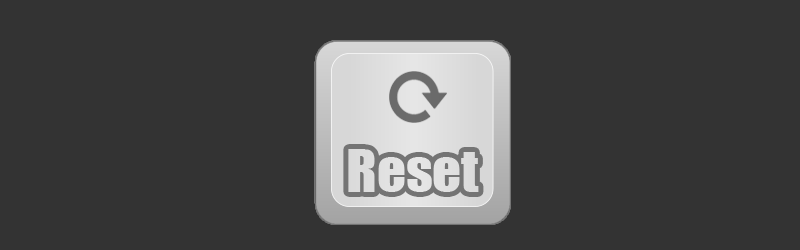
<style>
.page{position:relative;width:800px;height:250px;background:#333333}
.page>*{position:absolute;margin:0}
.t1{font:53.6px "Impact";color:#e8e8e8;scale:1.06 1}
</style>
<div class="page">
<p class="t1" style="left:348px;top:149px;width:131px;height:43px">Reset</p>
</div>
